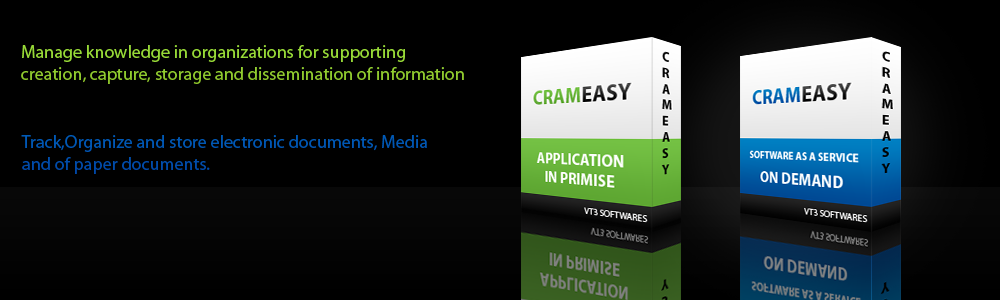
<style>
.page{position:relative;width:1000px;height:300px;background:#000000}
.page>*{position:absolute;margin:0}
.t1{font:18px "MyriadPro-Regular";color:#91cd30}
.t2{font:18px "MyriadPro-Regular";color:#0056b3}
</style>
<div class="page">
<p class="t1" style="left:21px;top:45px;width:443px;height:39px">Manage knowledge in organizations for supporting <br>creation, capture, storage and dissemination of information</p>
<p class="t2" style="left:21px;top:135px;width:406px;height:39px">Track,Organize and store electronic documents, Media <br>and of paper documents.</p>
</div>
